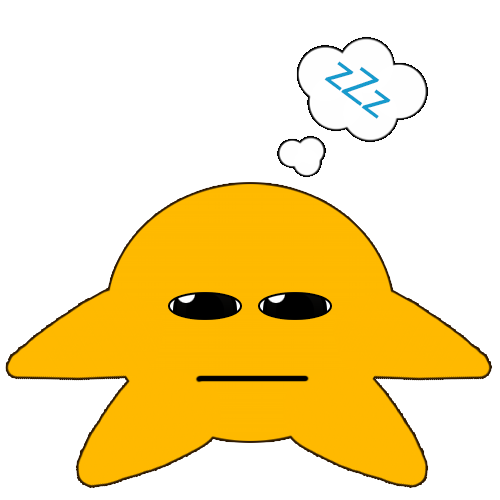
<style>
.page{position:relative;width:500px;height:500px;background:#ffffff}
.page>*{position:absolute;margin:0}
.t1{font:48px "MyriadPro-Regular";color:#179ccd}
</style>
<div class="page">
<p class="t1" style="left:324px;top:61px;width:67px;height:58px;rotate:37deg">zZz</p>
</div>
